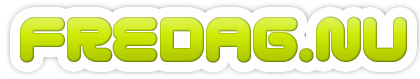
<style>
.page{position:relative;width:420px;height:79px;background:#fefefe}
.page>*{position:absolute;margin:0}
.t1{font:64.3px "Gota"}
</style>
<div class="page">
<p class="t1" style="left:20px;top:16px;width:387px;height:47px">FREDAG.nu</p>
</div>
